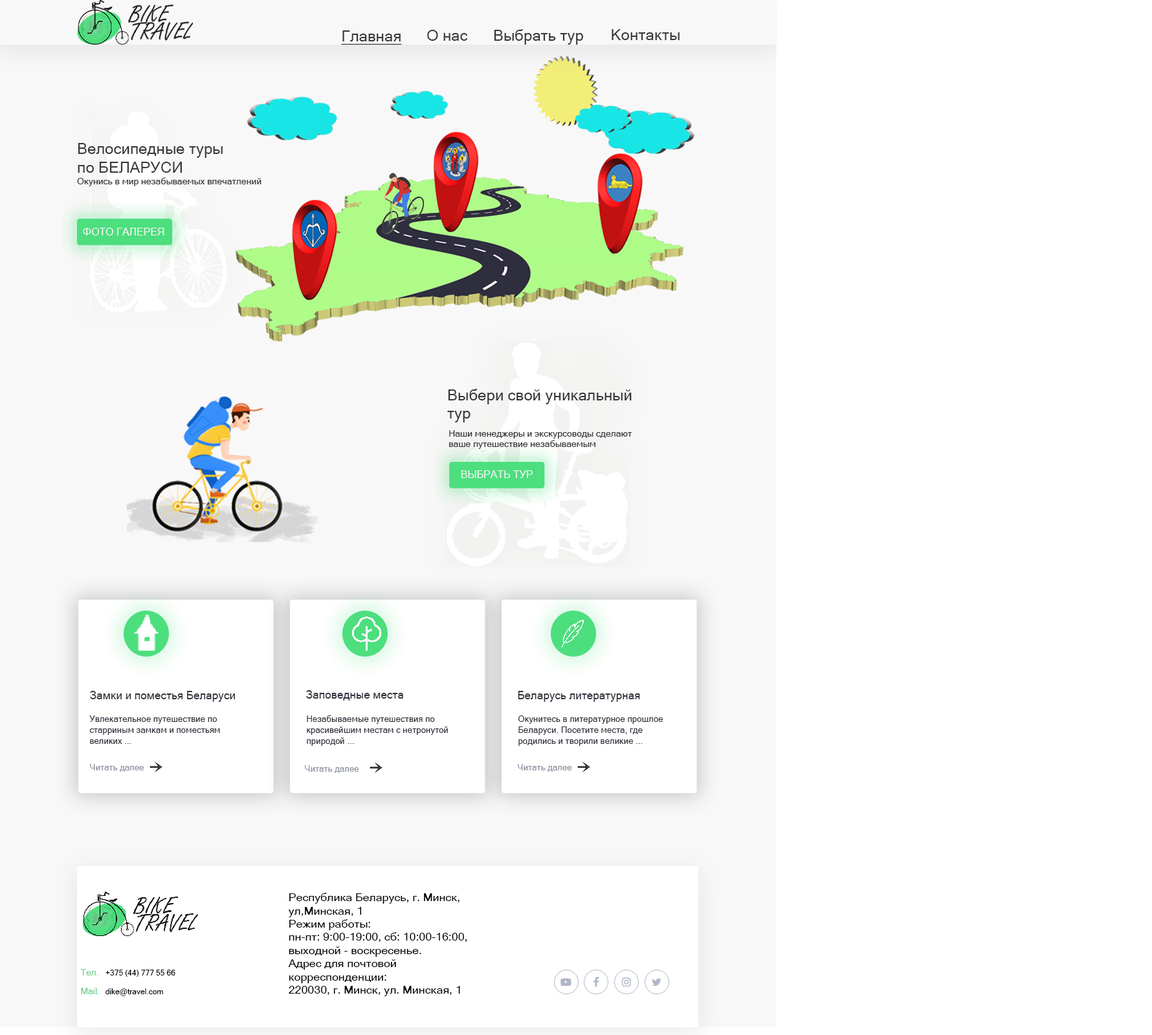
<style>
.page{position:relative;width:1152px;height:1035px;background:#ffffff}
.page>*{position:absolute;margin:0}
.t1{font:15.5px "MicrosoftSansSerif";color:#393838}
.t2{font:15.5px "MicrosoftSansSerif";color:#393838;text-decoration:underline}
.t3{font:9.1px "MicrosoftSansSerif";color:#393838}
.t4{font:10.4px "MicrosoftSansSerif";color:#f7f6f6}
.t5{font:11.6px "MicrosoftSansSerif";color:#2e323b;scale:0.95 1}
.t6{font:9.1px "MicrosoftSansSerif";color:#2e323b;scale:0.95 1}
.t7{font:9.1px "MicrosoftSansSerif";color:#8a909e;scale:0.95 1}
.t8{font:11px "MicrosoftSansSerif";color:#000000;scale:1.04 1}
.t9{font:9.1px "MicrosoftSansSerif";color:#6ed08f}
.t10{font:7.8px "MicrosoftSansSerif";color:#000000}
</style>
<div class="page">
<p class="t1" style="left:427px;top:30px;width:41px;height:11px">О нас</p>
<p class="t1" style="left:494px;top:29px;width:89px;height:16px">Выбрать тур</p>
<p class="t1" style="left:611px;top:29px;width:68px;height:11px">Контакты</p>
<p class="t2" style="left:341px;top:30px;width:61px;height:15px">Главная</p>
<p class="t1" style="left:78px;top:143px;width:145px;height:30px">Велосипедные туры<br>по БЕЛАРУСИ</p>
<p class="t3" style="left:77px;top:177px;width:184px;height:9px">Окунись в мир незабываемых впечатлений</p>
<p class="t4" style="left:83px;top:228px;width:81px;height:8px">ФОТО ГАЛЕРЕЯ</p>
<p class="t1" style="left:447px;top:389px;width:185px;height:34px">Выбери свой уникальный<br>тур</p>
<p class="t3" style="left:449px;top:430px;width:183px;height:19px">Наши менеджеры и экскурсоводы сделают<br>ваше путешествие незабываемым</p>
<p class="t4" style="left:461px;top:470px;width:72px;height:8px">ВЫБРАТЬ ТУР</p>
<p class="t5" style="left:90px;top:691px;width:145px;height:11px">Замки и поместья Беларуси</p>
<p class="t5" style="left:306px;top:690px;width:97px;height:11px">Заповедные места</p>
<p class="t5" style="left:518px;top:691px;width:122px;height:11px">Беларусь литературная</p>
<p class="t6" style="left:89px;top:716px;width:131px;height:28px">Увлекательное путешествие по<br>старриным замкам и поместьям<br>великих ...</p>
<p class="t6" style="left:307px;top:715px;width:141px;height:31px">Незабываемые путешествия по<br>красивейшим местам с нетронутой<br>природой ...</p>
<p class="t6" style="left:518px;top:716px;width:145px;height:30px">Окунитесь в литературное прошлое<br>Беларуси. Посетите места, где<br>родились и творили великие ...</p>
<p class="t7" style="left:90px;top:764px;width:54px;height:8px">Читать далее</p>
<p class="t7" style="left:305px;top:765px;width:54px;height:8px">Читать далее</p>
<p class="t7" style="left:518px;top:764px;width:54px;height:8px">Читать далее</p>
<p class="t8" style="left:288px;top:893px;width:179px;height:103px">Республика Беларусь, г. Минск,<br>ул,Минская, 1<br>Режим работы:<br>пн-пт: 9:00-19:00, сб: 10:00-16:00,<br>выходной - воскресенье.<br>Адрес для почтовой<br>корреспонденции:<br>220030, г. Минск, ул. Минская, 1</p>
<p class="t9" style="left:80px;top:969px;width:19px;height:26px">Тел.<br><br>Mail.</p>
<p class="t10" style="left:105px;top:970px;width:70px;height:7px">+375 (44) 777 55 66</p>
<p class="t10" style="left:105px;top:989px;width:58px;height:7px">dike@travel.com</p>
</div>
